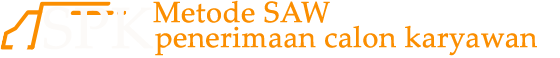
<style>
.page{position:relative;width:560px;height:58px;background:#ffffff}
.page>*{position:absolute;margin:0}
.t1{font:29px "PalatinoLinotype-Roman";color:#fb8e00;font-weight:bold}
</style>
<div class="page">
<p class="t1" style="left:153px;top:0px;width:177px;height:23px">Metode SAW</p>
<p class="t1" style="left:155px;top:25px;width:382px;height:31px">penerimaan calon karyawan</p>
</div>
